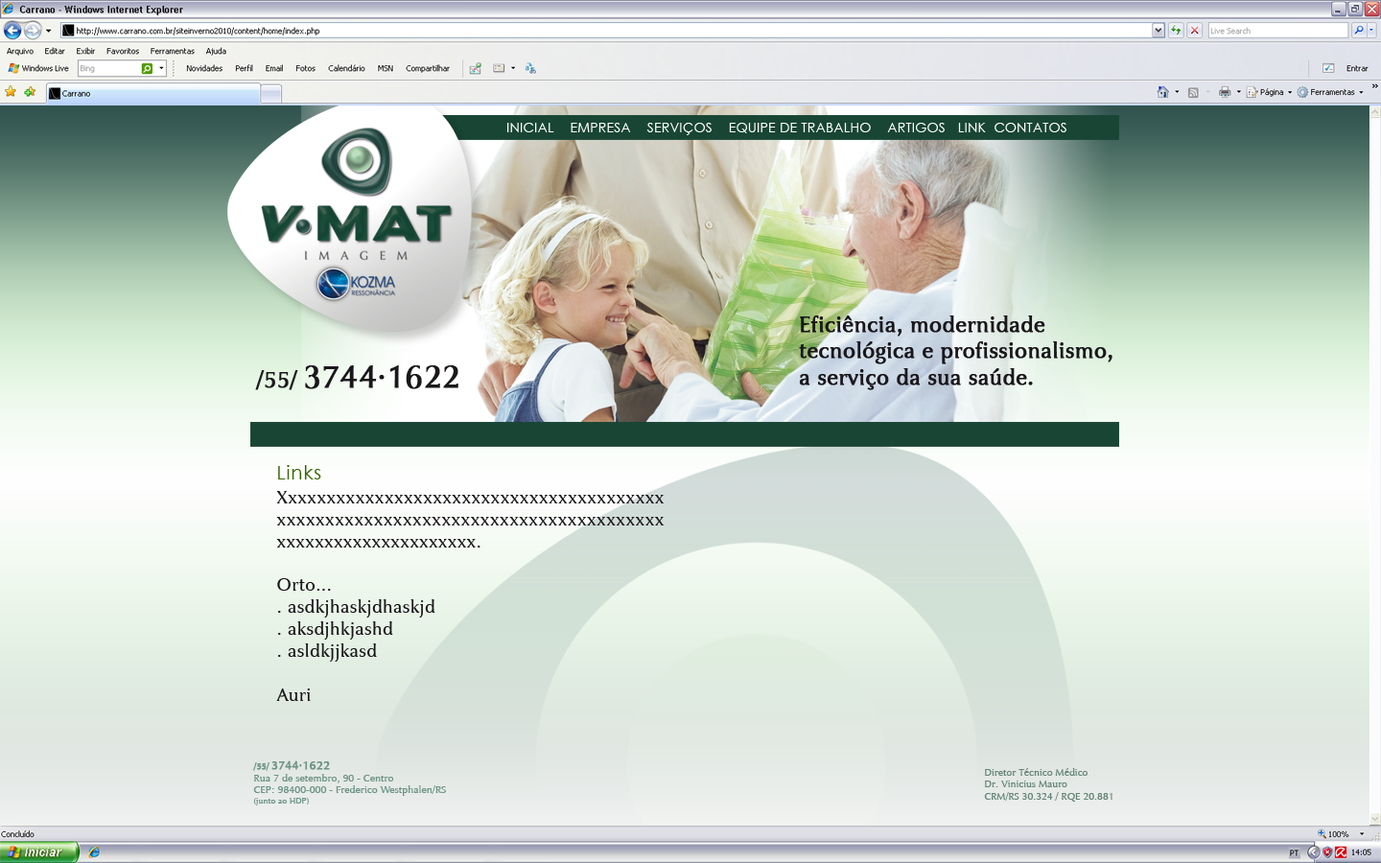
<style>
.page{position:relative;width:1381px;height:863px}
.page>*{position:absolute;margin:0}
.t1{font:13px "CenturyGothic";letter-spacing:0.035em;color:#ffffff}
.t2{font:22px "JaguarJCBook";color:#1a171b;font-weight:bold}
.t3{font:31.6px "JaguarJCBook";color:#1a171b;font-weight:bold}
.t4{font:22.6px "JaguarJCBook";color:#1a171b;font-weight:bold}
.t5{font:19.4px "CenturyGothic";letter-spacing:0.035em;color:#336600}
.t6{font:18px/22px "JaguarJCBook";letter-spacing:0.02em;color:#1a171b}
.t7{font:10.1px "JaguarJCBook";color:#6d9486}
.t8{font:8.4px "JaguarJCBook";color:#6d9486;font-weight:bold}
.t9{font:11.8px "JaguarJCBook";color:#6d9486;font-weight:bold}
.t10{font:8.4px "JaguarJCBook";color:#6d9486}
.t11{font:10px "JaguarJCBook";color:#658678}
</style>
<div class="page">
<p class="t1" style="left:507px;top:123px;width:560px;height:12px">INICIAL    EMPRESA    SERVIÇOS    EQUIPE DE TRABALHO    ARTIGOS   LINK  CONTATOS</p>
<p class="t2" style="left:799px;top:316px;width:314px;height:74px">Eficiência, modernidade <br>tecnológica e profissionalismo, <br>a serviço da sua saúde.</p>
<p class="t3" style="left:255px;top:365px;width:204px;height:25px"><span class="t4">/55/ </span>3744·1622</p>
<p class="t5" style="left:278px;top:465px;width:43px;height:15px">Links</p>
<p class="t6" style="left:276px;top:491px;width:388px;height:210px;text-align:justify">Xxxxxxxxxxxxxxxxxxxxxxxxxxxxxxxxxxxxxxxxxxxxxxxxxxxxxxxxxxxxxxxxxxxxxxxxxxxxxxxxxxxxxxxxxxxxxxxxxxxxx.<br><br>Orto...<br>. asdkjhaskjdhaskjd<br>. aksdjhkjashd<br>. asldkjjkasd<br><br>Auri</p>
<p class="t7" style="left:253px;top:761px;width:193px;height:45px"><span class="t8">/55/ </span><span class="t9">3744·1622<br></span>Rua 7 de setembro, 90 - Centro<br>CEP: 98400-000 - Frederico Westphalen/RS<br><span class="t10">(junto ao HDP)</span></p>
<p class="t11" style="left:984px;top:768px;width:129px;height:34px">Diretor Técnico Médico<br>Dr. Vinicius Mauro <br>CRM/RS 30.324 / RQE 20.881</p>
</div>
